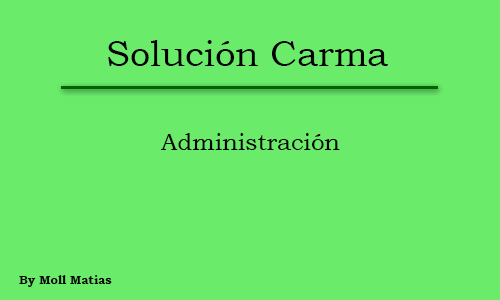
<style>
.page{position:relative;width:500px;height:300px;background:#6aec6a}
.page>*{position:absolute;margin:0}
.t1{font:36px "BookmanOldStyle";color:#020202}
.t2{font:24px "BookmanOldStyle";color:#020202}
.t3{font:12px "BookmanOldStyle-Bold";color:#020202}
</style>
<div class="page">
<p class="t1" style="left:108px;top:40px;width:280px;height:26px">Solución Carma</p>
<p class="t2" style="left:161px;top:133px;width:179px;height:17px">Administración</p>
<p class="t3" style="left:19px;top:275px;width:93px;height:12px">By Moll Matias</p>
</div>
